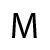
<style>
.page{position:relative;width:50px;height:50px;background:#ffffff}
.page>*{position:absolute;margin:0}
.t1{font:36px "MyriadPro-Regular";color:#000000}
</style>
<div class="page">
<p class="t1" style="left:12px;top:13px;width:25px;height:25px">M</p>
</div>
